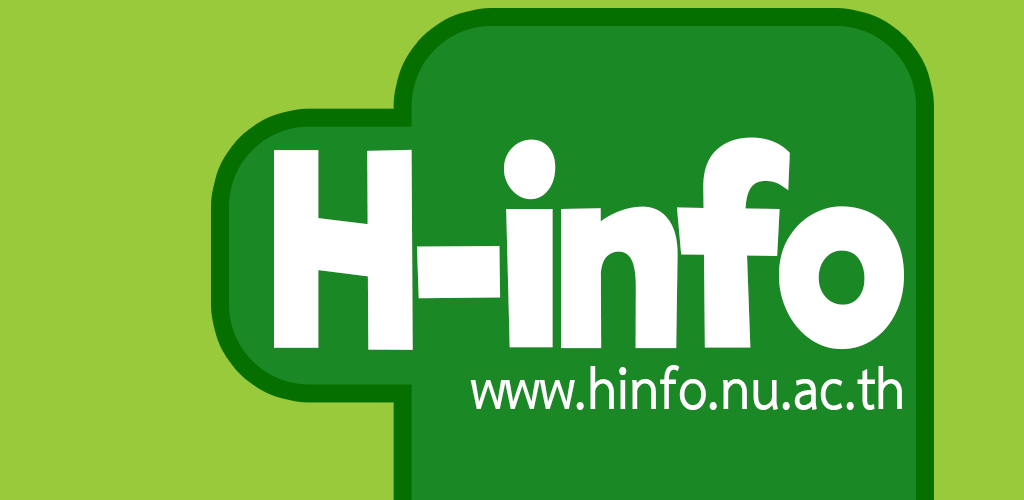
<style>
.page{position:relative;width:1024px;height:500px;background:#99ca3c}
.page>*{position:absolute;margin:0}
.t1{font:260.7px "RifficFree-Bold";color:#ffffff;scale:0.85 1}
.t2{font:86.4px "THSarabunPSK-Bold";color:#ffffff;scale:0.83 1}
</style>
<div class="page">
<p class="t1" style="left:274px;top:137px;width:630px;height:213px">H-info</p>
<p class="t2" style="left:470px;top:365px;width:432px;height:45px">www.hinfo.nu.ac.th</p>
</div>
